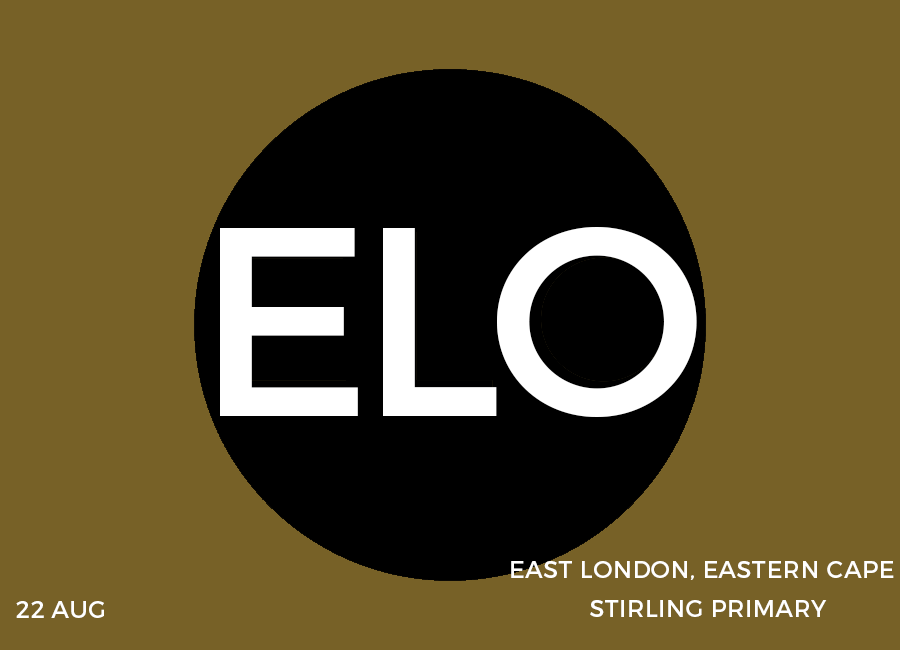
<style>
.page{position:relative;width:900px;height:650px;background:#776127}
.page>*{position:absolute;margin:0}
.t1{font:269px "Montserrat-Regular";letter-spacing:-0.05em;color:#ffffff}
.t2{font:24px "Montserrat-Regular";letter-spacing:0.02em;color:#ffffff}
</style>
<div class="page">
<p class="t1" style="left:220px;top:227px;width:477px;height:190px">ELO</p>
<p class="t2" style="left:511px;top:561px;width:383px;height:19px">EAST LONDON, EASTERN CAPE</p>
<p class="t2" style="left:16px;top:601px;width:88px;height:17px">22 AUG</p>
<p class="t2" style="left:590px;top:600px;width:237px;height:17px">STIRLING PRIMARY</p>
</div>
